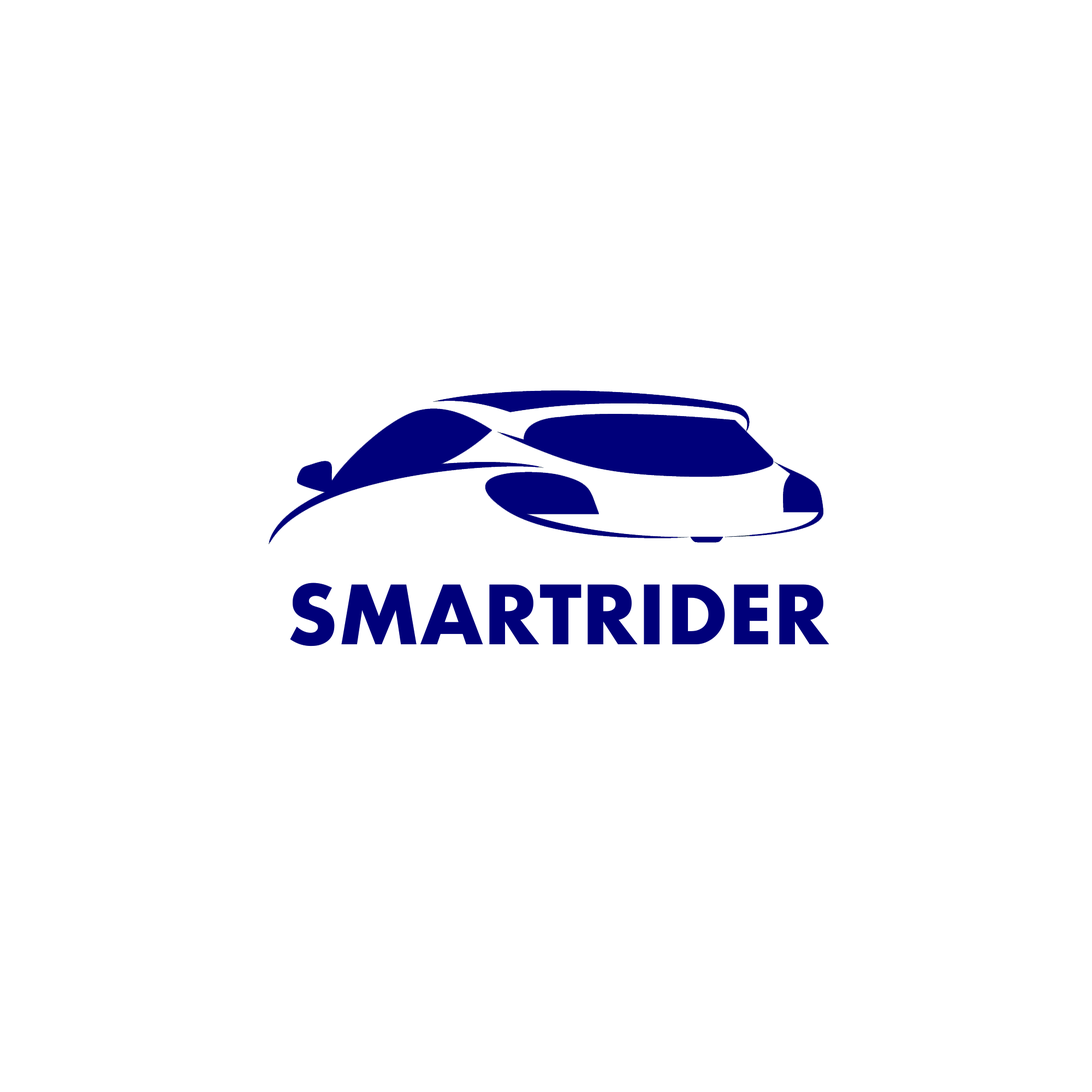
<style>
.page{position:relative;width:1092px;height:1092px;background:#ffffff}
.page>*{position:absolute;margin:0}
.t1{font:79.2px "Futura-Bold";color:#00007a}
</style>
<div class="page">
<p class="t1" style="left:290px;top:583px;width:539px;height:63px">SMARTRIDER</p>
</div>
